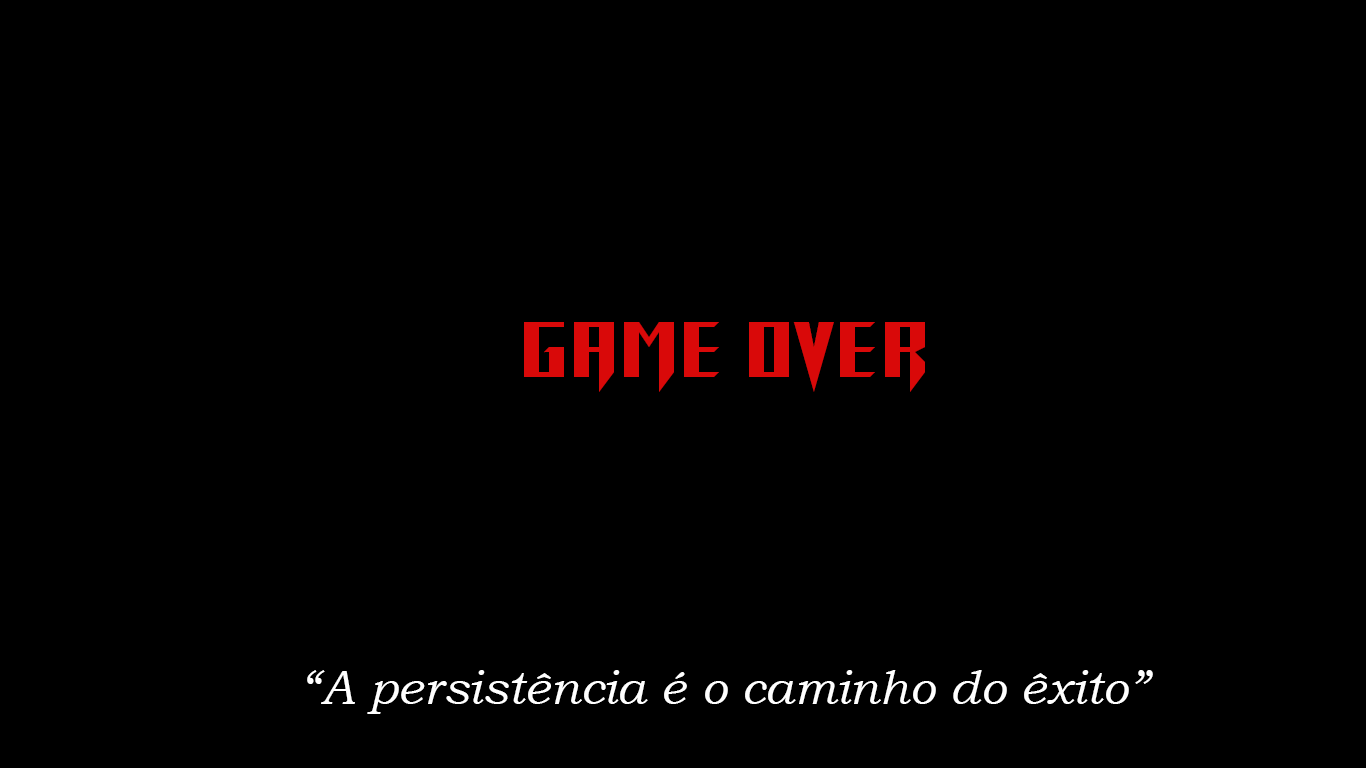
<style>
.page{position:relative;width:1366px;height:768px;background:#000000}
.page>*{position:absolute;margin:0}
.t1{font:100px "RETURNTOCASTLE";color:#d90909}
.t2{font:48px "BookmanOldStyle-Italic";color:#ffffff}
</style>
<div class="page">
<p class="t1" style="left:524px;top:322px;width:401px;height:70px">GAME OVER</p>
<p class="t2" style="left:307px;top:670px;width:846px;height:44px">“A persistência é o caminho do êxito”</p>
</div>
